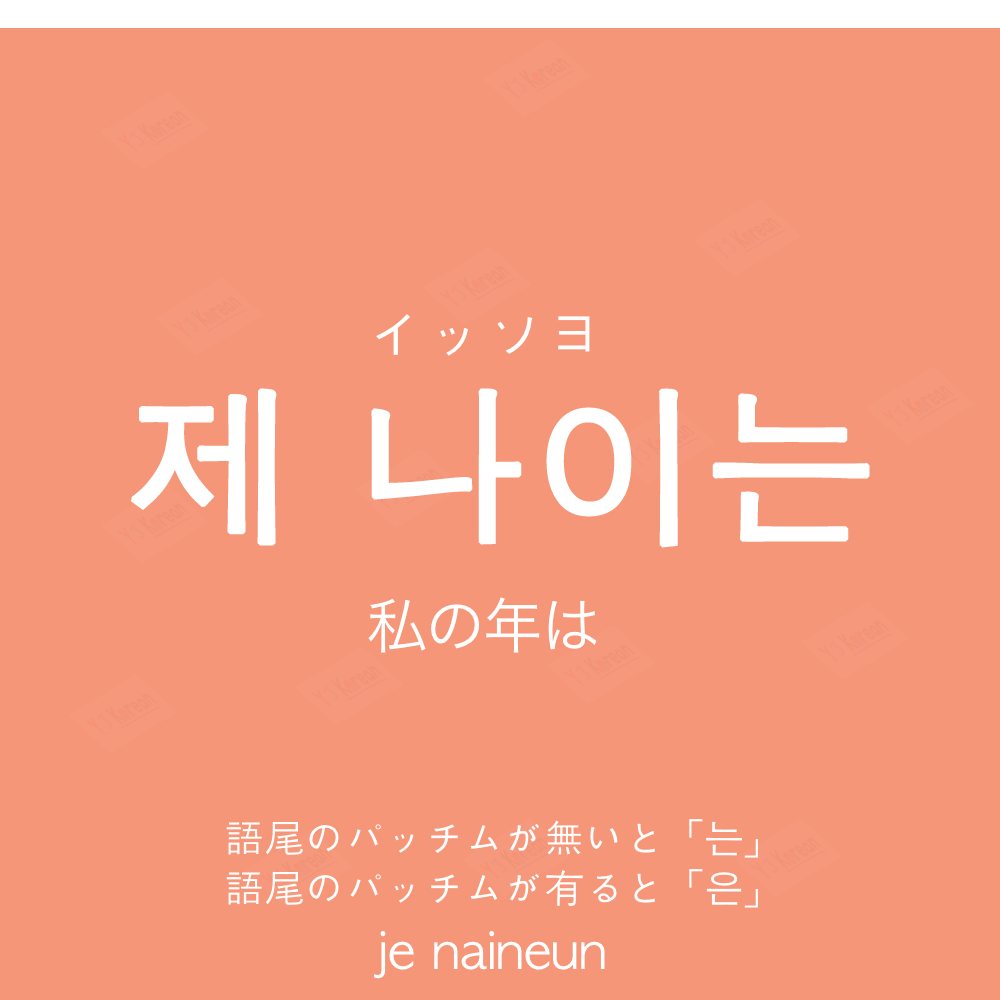
<style>
.page{position:relative;width:1000px;height:1000px;background:#f69679}
.page>*{position:absolute;margin:0}
.t1{font:60px "AppleGothic";color:#ffffff}
.t2{font:170px "AppleGothic";color:#ffffff;font-weight:bold}
.t3{font:60px "HiraKakuProN-W3";color:#ffffff}
.t4{font:40px "AppleGothic";color:#ffffff}
.t5{font:50px "AppleGothic";color:#ffffff}
</style>
<div class="page">
<p class="t1" style="left:376px;top:314px;width:214px;height:42px">イッソヨ</p>
<p class="t2" style="left:130px;top:388px;width:740px;height:160px">제 나이는</p>
<p class="t3" style="left:368px;top:597px;width:229px;height:56px">私の年は</p>
<p class="t4" style="left:226px;top:819px;width:532px;height:39px">語尾のパッチムが無いと「는」</p>
<p class="t4" style="left:226px;top:869px;width:532px;height:39px">語尾のパッチムが有ると「은」</p>
<p class="t5" style="left:374px;top:931px;width:231px;height:48px">je naineun</p>
</div>
